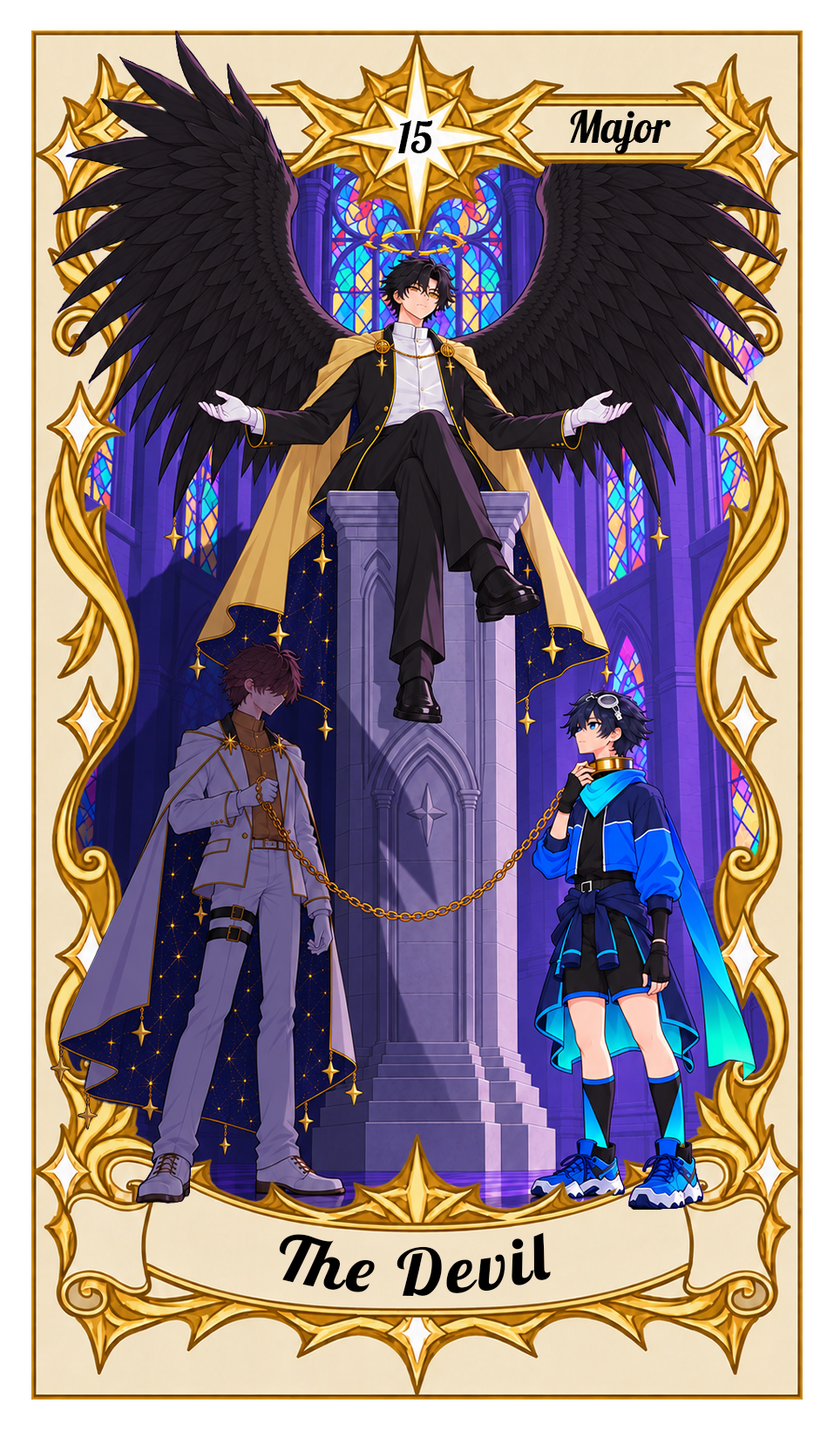
<style>
.page{position:relative;width:834px;height:1430px}
.page>*{position:absolute;margin:0}
.t1{font:43.6px "Lobster-Regular";color:#000000}
.t2{font:65.3px "Lobster-Regular";letter-spacing:0.05em;color:#000000}
</style>
<div class="page">
<p class="t1" style="left:570px;top:110px;width:101px;height:44px">Major</p>
<p class="t1" style="left:398px;top:120px;width:35px;height:33px">15</p>
<p class="t2" style="left:279px;top:1233px;width:272px;height:63px">The Devil</p>
</div>
